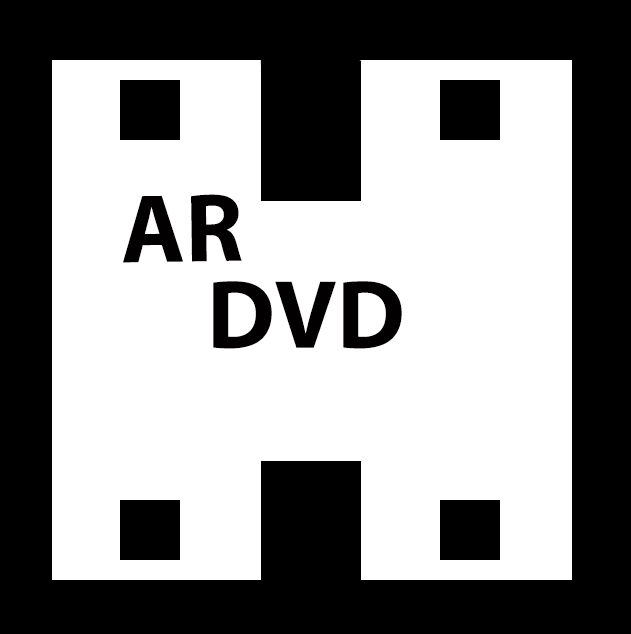
<style>
.page{position:relative;width:631px;height:634px;background:#ffffff}
.page>*{position:absolute;margin:0}
.t1{font:98px "MyriadPro-Bold";color:#020000}
</style>
<div class="page">
<p class="t1" style="left:123px;top:194px;width:119px;height:69px;rotate:-1deg">AR</p>
<p class="t1" style="left:213px;top:281px;width:189px;height:68px">DVD</p>
</div>
